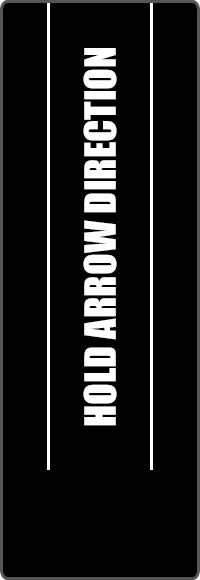
<style>
.page{position:relative;width:200px;height:580px;background:#000000}
.page>*{position:absolute;margin:0}
.t1{font:40px "Impact";color:#ffffff}
</style>
<div class="page">
<p class="t1" style="left:83px;top:48px;width:34px;height:378px;rotate:-90deg">HOLD ARROW DIRECTION</p>
</div>
